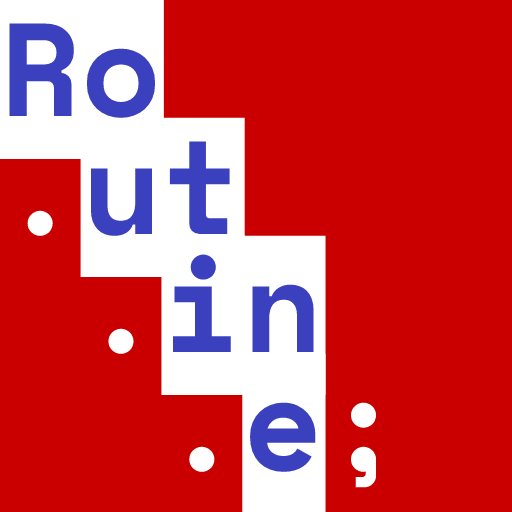
<style>
.page{position:relative;width:512px;height:512px;background:#ca0000}
.page>*{position:absolute;margin:0}
.t1{font:132.1px "SpaceMono-Bold";color:#3b40bf}
.t2{font:132.1px "SpaceMono-Bold";color:#ffffff}
</style>
<div class="page">
<p class="t1" style="left:0px;top:0px;width:376px;height:513px">Ro<br><span class="t2">.</span>ut<br> <span class="t2">.</span>in<br>  <span class="t2">.</span>e<span class="t2">;</span></p>
</div>
